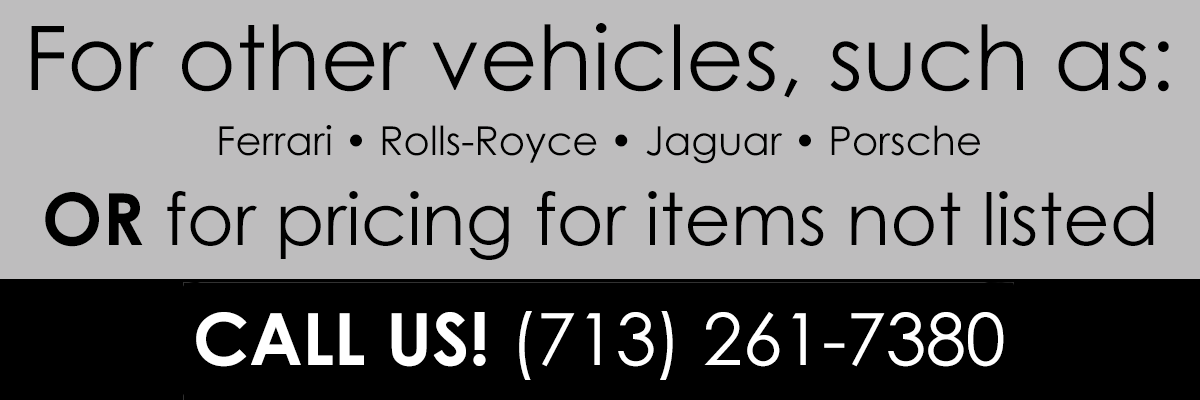
<style>
.page{position:relative;width:1200px;height:400px;background:#bebdbe}
.page>*{position:absolute;margin:0}
.t1{font:89.3px "CenturyGothic";color:#000000}
.t2{font:40px "CenturyGothic";color:#000000}
.t3{font:72px "CenturyGothic";color:#000000}
.t4{font:72px "CenturyGothic-Bold";color:#000000}
.t5{font:72px "CenturyGothic";color:#ffffff}
.t6{font:72px "CenturyGothic-Bold";color:#ffffff}
</style>
<div class="page">
<p class="t1" style="left:31px;top:23px;width:1138px;height:75px">For other vehicles, such as:</p>
<p class="t2" style="left:219px;top:125px;width:761px;height:39px">Ferrari • Rolls-Royce • Jaguar • Porsche</p>
<p class="t3" style="left:45px;top:191px;width:1109px;height:69px"><span class="t4">OR</span> for pricing for items not listed</p>
<p class="t5" style="left:196px;top:311px;width:808px;height:69px"><span class="t6">CALL US! </span>(713) 261-7380</p>
</div>
